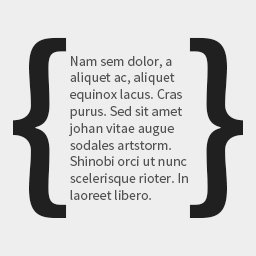
<style>
.page{position:relative;width:256px;height:256px;background:#eeeeee}
.page>*{position:absolute;margin:0}
.t1{font:209.7px "SourceSansPro-Semibold";letter-spacing:0.11em;color:#202021;text-transform:uppercase}
.t2{font:14px "SourceSansPro-Regular";color:#525254}
</style>
<div class="page">
<p class="t1" style="left:13px;top:37px;width:54px;height:181px">{</p>
<p class="t1" style="left:189px;top:37px;width:54px;height:181px">}</p>
<p class="t2" style="left:69px;top:56px;width:119px;height:144px">Nam sem dolor, a aliquet ac, aliquet equinox lacus. Cras purus. Sed sit amet johan vitae augue sodales artstorm. Shinobi orci ut nunc scelerisque rioter. In laoreet libero.</p>
</div>
